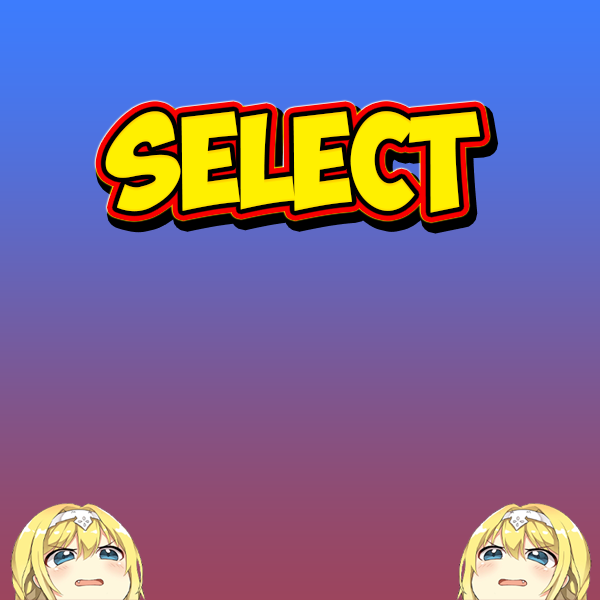
<style>
.page{position:relative;width:600px;height:600px}
.page>*{position:absolute;margin:0}
.t1{font:150px "000ObelixProTB";letter-spacing:-0.02em;color:#fff000}
</style>
<div class="page">
<p class="t1" style="left:105px;top:111px;width:376px;height:102px">Select</p>
</div>
